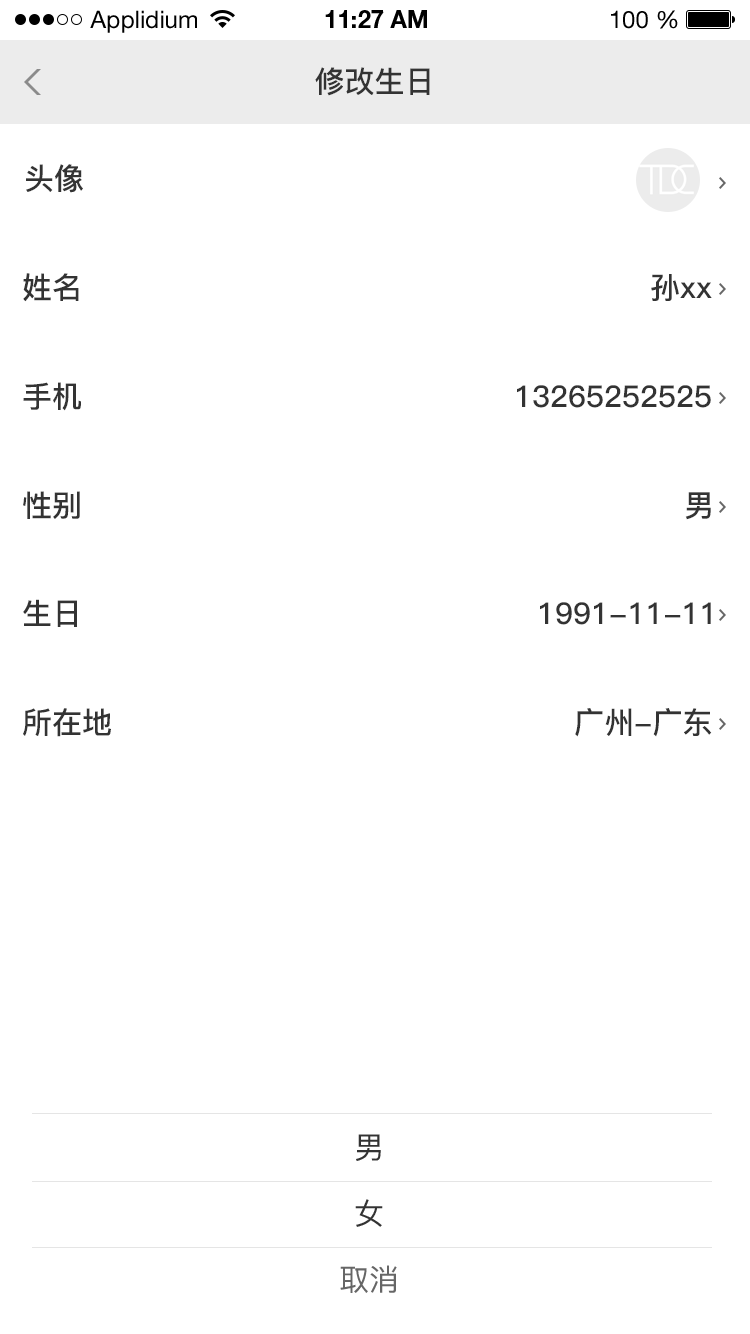
<style>
.page{position:relative;width:750px;height:1334px;background:#ffffff}
.page>*{position:absolute;margin:0}
.t1{font:24px "HelveticaNeueLTStd-Roman";color:#000000}
.t2{font:24px "HelveticaNeueLTStd-Bd";color:#000000}
.t3{font:30px "PingFang-SC-Bold";color:#333333}
.t4{font:30px "PingFang-SC-Medium";color:#333333}
.t5{font:30px "PingFang-SC-Medium";color:#666666}
</style>
<div class="page">
<p class="t1" style="left:90px;top:10px;width:107px;height:23px">Applidium</p>
<p class="t2" style="left:325px;top:10px;width:102px;height:18px">11:27 AM</p>
<p class="t1" style="left:611px;top:10px;width:67px;height:19px">100 %</p>
<p class="t3" style="left:315px;top:67px;width:115px;height:29px">修改生日</p>
<p class="t3" style="left:26px;top:164px;width:57px;height:29px">头像</p>
<p class="t3" style="left:23px;top:273px;width:56px;height:29px">姓名</p>
<p class="t3" style="left:651px;top:274px;width:61px;height:27px">孙xx</p>
<p class="t3" style="left:23px;top:382px;width:58px;height:29px">手机</p>
<p class="t3" style="left:517px;top:385px;width:194px;height:23px">13265252525</p>
<p class="t3" style="left:23px;top:491px;width:57px;height:28px">性别</p>
<p class="t3" style="left:685px;top:492px;width:26px;height:28px">男</p>
<p class="t3" style="left:23px;top:599px;width:54px;height:28px">生日</p>
<p class="t3" style="left:540px;top:602px;width:171px;height:23px">1991-11-11</p>
<p class="t3" style="left:23px;top:708px;width:88px;height:29px">所在地</p>
<p class="t3" style="left:575px;top:708px;width:137px;height:29px">广州-广东</p>
<p class="t4" style="left:356px;top:1134px;width:25px;height:27px">男</p>
<p class="t4" style="left:355px;top:1199px;width:28px;height:28px">女</p>
<p class="t5" style="left:340px;top:1265px;width:57px;height:28px">取消</p>
</div>
